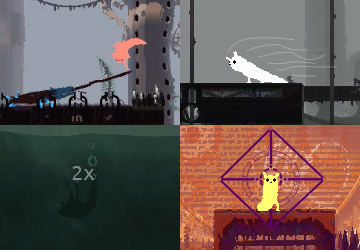
<style>
.page{position:relative;width:360px;height:250px}
.page>*{position:absolute;margin:0}
.t1{font:23.2px "UbuntuMono-Regular";letter-spacing:0.02em;color:#808684}
</style>
<div class="page">
<p class="t1" style="left:72px;top:166px;width:22px;height:14px">2x</p>
</div>
